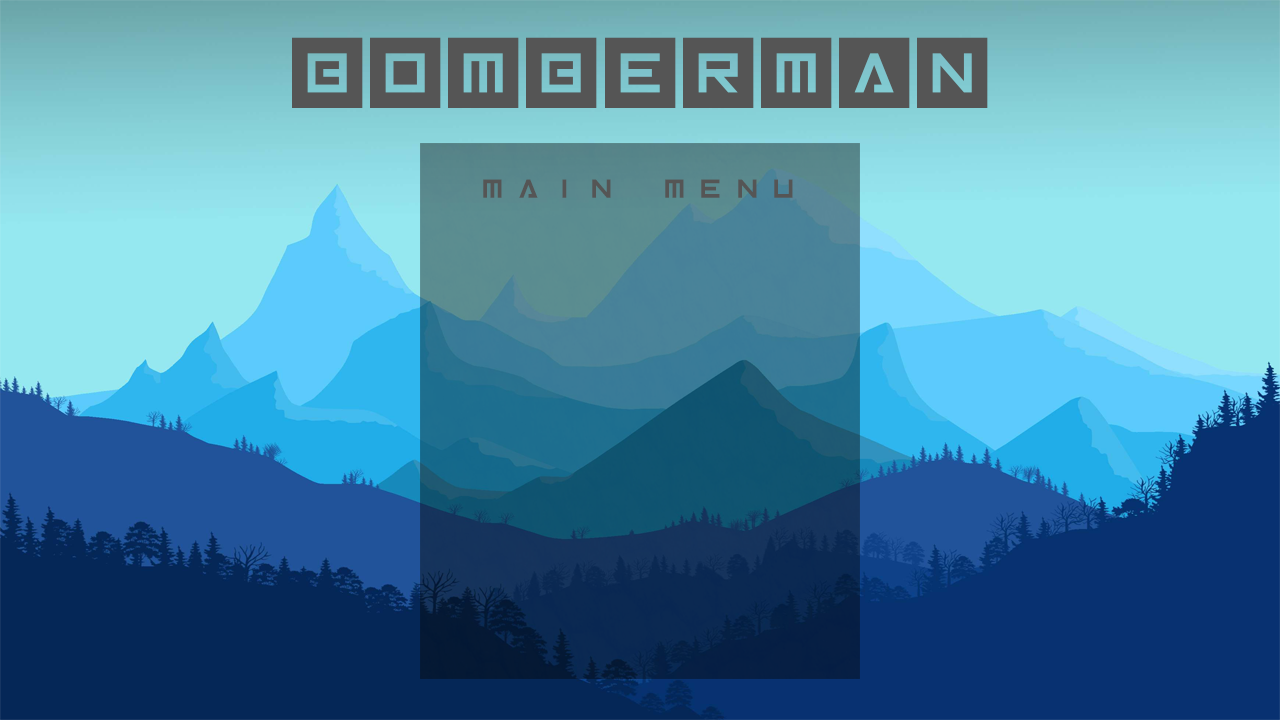
<style>
.page{position:relative;width:1280px;height:720px}
.page>*{position:absolute;margin:0}
.t1{font:125px "Inversionz";color:#555555}
.t2{font:58.3px "Inversionz";color:#555555}
</style>
<div class="page">
<p class="t1" style="left:292px;top:37px;width:696px;height:71px">bomberman</p>
<p class="t2" style="left:483px;top:179px;width:310px;height:19px">MAIN MENU</p>
</div>
